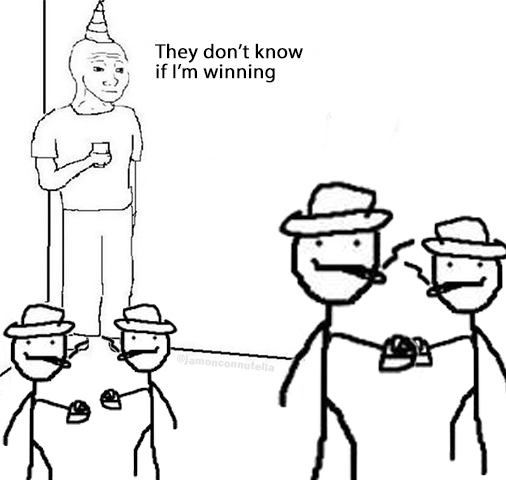
<style>
.page{position:relative;width:506px;height:480px;background:#ffffff}
.page>*{position:absolute;margin:0}
.t1{font:20.2px "MyriadPro-Regular";color:#000000;font-weight:bold}
</style>
<div class="page">
<p class="t1" style="left:155px;top:43px;width:148px;height:40px">They don’t know<br>if I’m winning</p>
</div>
